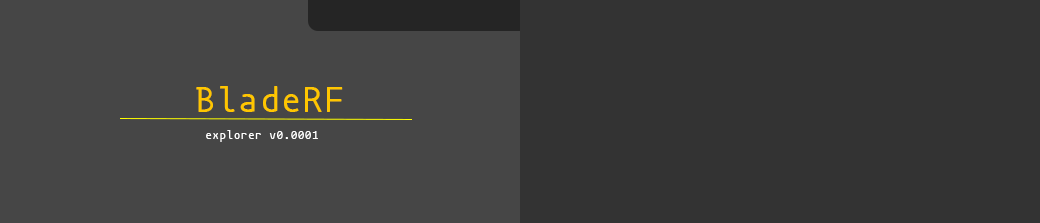
<style>
.page{position:relative;width:1040px;height:223px;background:#333333}
.page>*{position:absolute;margin:0}
.t1{font:36px "mononokiNerdFontCompleteM-Regular";letter-spacing:0.02em;color:#ffc600}
.t2{font:12px "mononokiNerdFontCompleteM-Regular";letter-spacing:0.02em;color:#ffffff}
</style>
<div class="page">
<p class="t1" style="left:196px;top:86px;width:147px;height:26px">BladeRF</p>
<p class="t2" style="left:206px;top:130px;width:112px;height:12px">explorer v0.0001</p>
</div>
